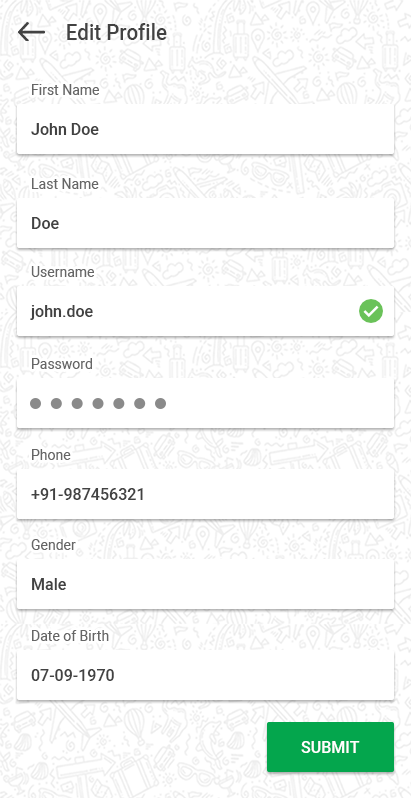
<style>
.page{position:relative;width:411px;height:798px;background:#ffffff}
.page>*{position:absolute;margin:0}
.t1{font:21.4px "Heebo-Medium";color:#424242;scale:0.96 1}
.t2{font:14px "Heebo-Regular";color:#666666}
.t3{font:16px "Heebo-Medium";color:#424242}
.t4{font:16px "Heebo-Medium";color:#ffffff;text-transform:uppercase}
</style>
<div class="page">
<p class="t1" style="left:67px;top:23px;width:100px;height:17px">Edit Profile</p>
<p class="t2" style="left:32px;top:84px;width:67px;height:11px">First Name</p>
<p class="t3" style="left:31px;top:123px;width:68px;height:12px">John Doe</p>
<p class="t2" style="left:32px;top:178px;width:67px;height:11px">Last Name</p>
<p class="t3" style="left:32px;top:217px;width:27px;height:12px">Doe</p>
<p class="t2" style="left:31px;top:266px;width:63px;height:11px">Username</p>
<p class="t3" style="left:30px;top:305px;width:63px;height:15px">john.doe</p>
<p class="t2" style="left:32px;top:358px;width:60px;height:11px">Password</p>
<p class="t2" style="left:32px;top:449px;width:39px;height:11px">Phone</p>
<p class="t3" style="left:31px;top:488px;width:112px;height:12px">+91-987456321</p>
<p class="t2" style="left:31px;top:539px;width:45px;height:11px">Gender</p>
<p class="t3" style="left:32px;top:578px;width:34px;height:12px">Male</p>
<p class="t2" style="left:32px;top:630px;width:77px;height:11px">Date of Birth</p>
<p class="t3" style="left:31px;top:669px;width:83px;height:12px">07-09-1970</p>
<p class="t4" style="left:301px;top:741px;width:59px;height:12px">Submit</p>
</div>
